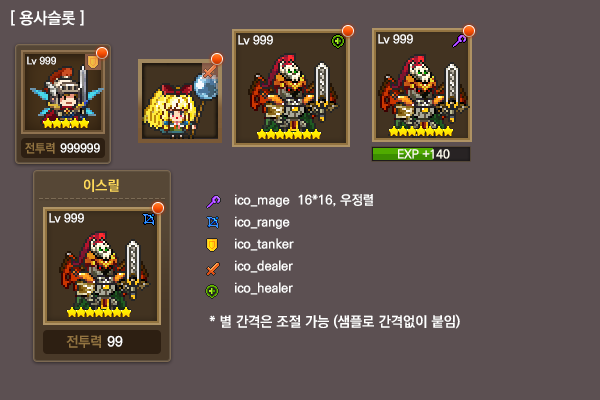
<style>
.page{position:relative;width:600px;height:400px;background:#5c5052}
.page>*{position:absolute;margin:0}
.t1{font:16px "KoPubDotumBold";color:#ffffff}
.t2{font:12px "KoPubDotumBold";color:#ffffff}
.t3{font:10px "KoPubDotumBold";color:#ffffff}
.t4{font:12px "KoPubDotumBold";color:#937441}
.t5{font:12px "KoPubDotumBold";color:#fffcee}
.t6{font:14px "KoPubDotumBold";color:#ffda5a}
.t7{font:13px/22px "KoPubDotumBold";color:#ffffff}
.t8{font:14px "KoPubDotumBold";color:#ffffff}
.t9{font:14px "KoPubDotumBold";color:#937441}
</style>
<div class="page">
<p class="t1" style="left:11px;top:10px;width:73px;height:16px">[ 용사슬롯 ]</p>
<p class="t2" style="left:238px;top:35px;width:35px;height:10px">Lv 999</p>
<p class="t2" style="left:378px;top:34px;width:35px;height:10px">Lv 999</p>
<p class="t3" style="left:27px;top:56px;width:29px;height:9px">Lv 999</p>
<p class="t4" style="left:25px;top:142px;width:30px;height:12px">전투력</p>
<p class="t2" style="left:60px;top:143px;width:40px;height:10px">999999</p>
<p class="t5" style="left:398px;top:149px;width:52px;height:10px">EXP +140</p>
<p class="t6" style="left:84px;top:179px;width:35px;height:13px">이스릴</p>
<p class="t7" style="left:235px;top:194px;width:138px;height:101px">ico_mage  16*16, 우정렬 <br>ico_range<br>ico_tanker<br>ico_dealer<br>ico_healer</p>
<p class="t2" style="left:49px;top:213px;width:35px;height:10px">Lv 999</p>
<p class="t8" style="left:209px;top:314px;width:251px;height:15px">* 별 간격은 조절 가능 (샘플로 간격없이 붙임)</p>
<p class="t9" style="left:66px;top:335px;width:35px;height:13px">전투력</p>
<p class="t8" style="left:107px;top:335px;width:16px;height:12px">99</p>
</div>
